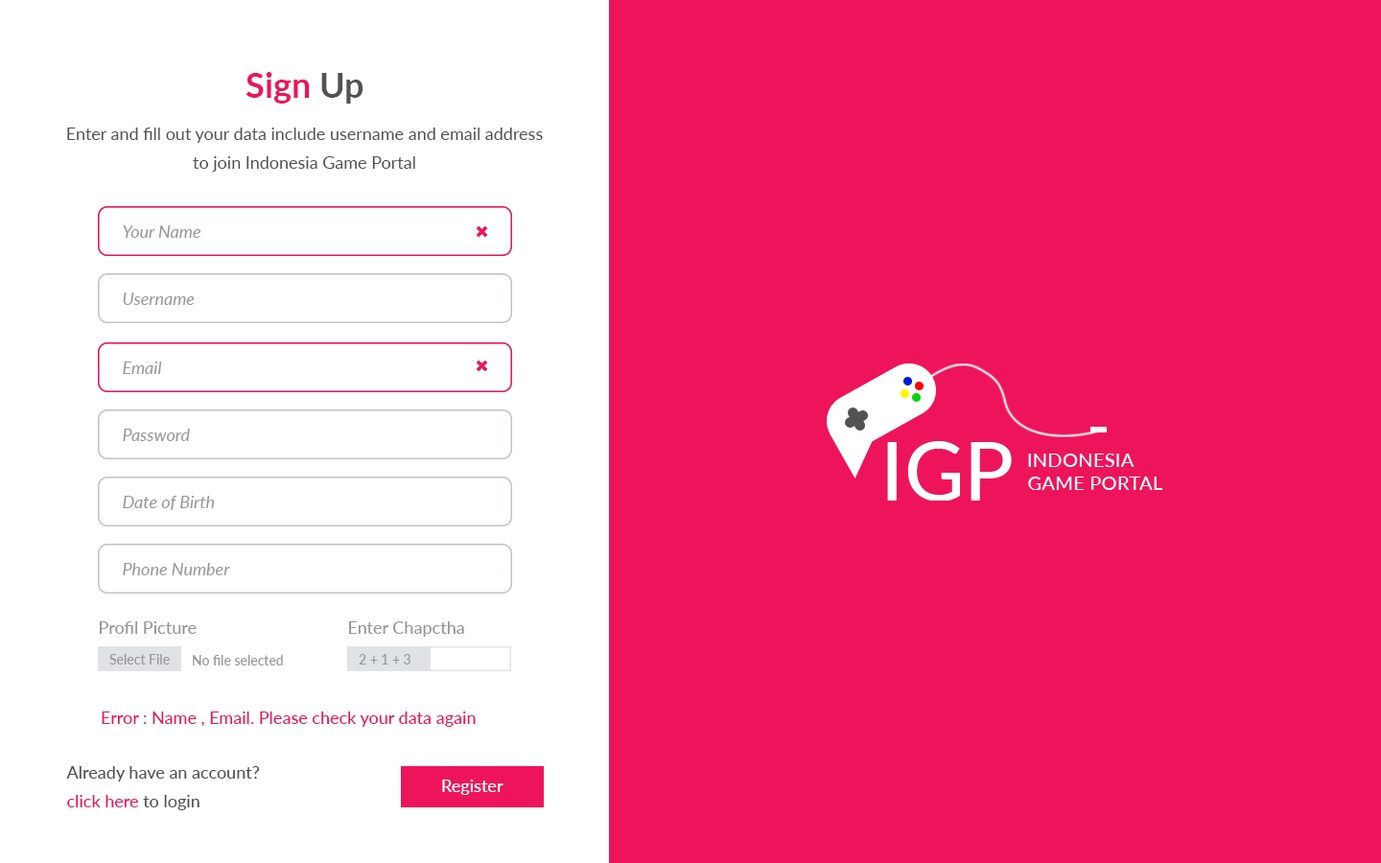
<style>
.page{position:relative;width:1381px;height:863px;background:#ed145b}
.page>*{position:absolute;margin:0}
.t1{font:34.5px "Lato-Bold";color:#ed145b}
.t2{font:34.5px "Lato-Bold";color:#525252}
.t3{font:17.3px/28.8px "Lato-Regular";color:#525252}
.t4{font:17.3px "Lato-Italic";color:#979797}
.t5{font:17.3px "Lato-Medium";color:#979797}
.t6{font:13.4px "Lato-Medium";color:#979797}
.t7{font:17.3px "Lato-Medium";color:#ed145b}
.t8{font:17.3px/28.8px "Lato-Medium";color:#535353}
.t9{font:17.3px/28.8px "Lato-Medium";color:#ed145b}
.t10{font:17.3px "Lato-Medium";color:#ffffff}
</style>
<div class="page">
<p class="t1" style="left:246px;top:72px;width:118px;height:32px">Sign<span class="t2"> Up</span></p>
<p class="t3" style="left:67px;top:128px;width:476px;height:44px;text-align:center">Enter and fill out your data include username and email address to join Indonesia Game Portal</p>
<p class="t4" style="left:123px;top:225px;width:77px;height:13px">Your Name</p>
<p class="t4" style="left:123px;top:293px;width:72px;height:12px">Username</p>
<p class="t4" style="left:123px;top:362px;width:39px;height:12px">Email</p>
<p class="t4" style="left:123px;top:429px;width:67px;height:12px">Password</p>
<p class="t4" style="left:123px;top:496px;width:92px;height:14px">Date of Birth</p>
<p class="t4" style="left:123px;top:563px;width:107px;height:13px">Phone Number</p>
<p class="t5" style="left:100px;top:622px;width:97px;height:12px">Profil Picture</p>
<p class="t5" style="left:349px;top:622px;width:115px;height:15px">Enter Chapctha</p>
<p class="t6" style="left:109px;top:654px;width:61px;height:11px">Select File</p>
<p class="t6" style="left:193px;top:655px;width:90px;height:11px">No file selected</p>
<p class="t6" style="left:359px;top:654px;width:52px;height:11px">2 + 1 + 3</p>
<p class="t7" style="left:102px;top:712px;width:374px;height:15px">Error : Name , Email. Please check your data again</p>
<p class="t8" style="left:66px;top:766px;width:194px;height:45px">Already have an account?<br><span class="t9">click here</span> to login</p>
<p class="t10" style="left:442px;top:780px;width:62px;height:15px">Register</p>
</div>
